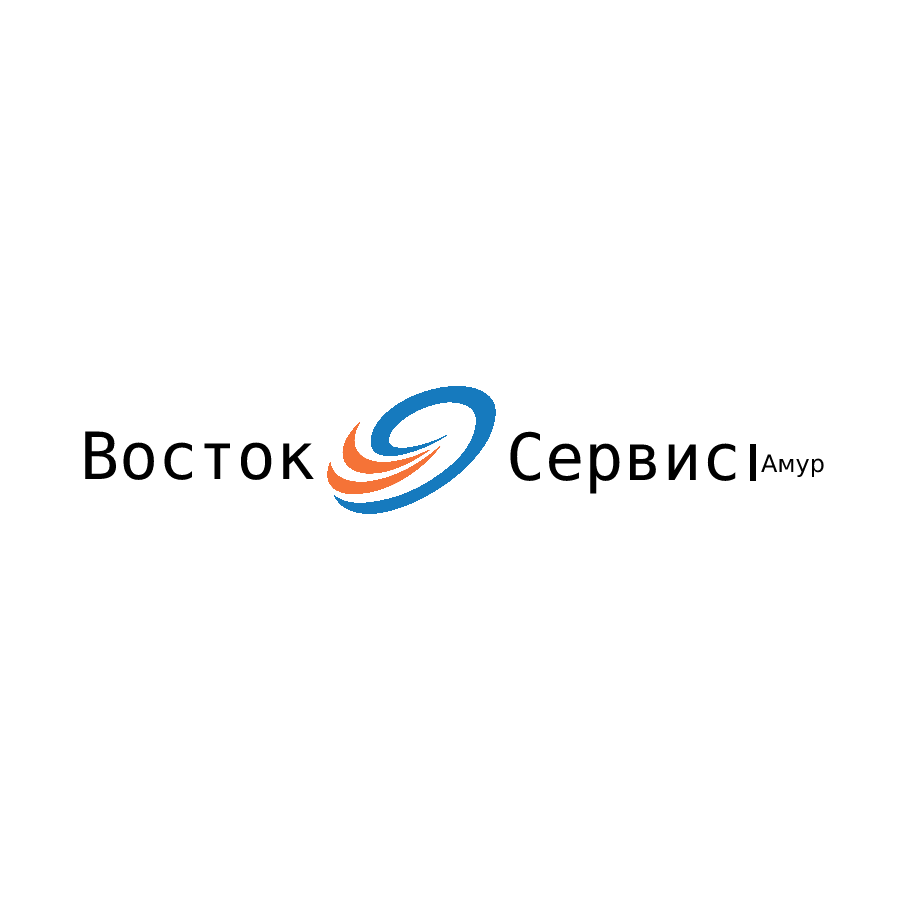
<style>
.page{position:relative;width:900px;height:900px;background:#ffffff}
.page>*{position:absolute;margin:0}
.t1{font:65px "DejaVuSansMono";color:#000000}
.t2{font:24px "DejaVuSans";color:#000000}
</style>
<div class="page">
<p class="t1" style="left:85px;top:431px;width:229px;height:49px">Восток</p>
<p class="t1" style="left:510px;top:431px;width:226px;height:63px">Сервис</p>
<p class="t2" style="left:761px;top:454px;width:63px;height:23px">Амур</p>
</div>
